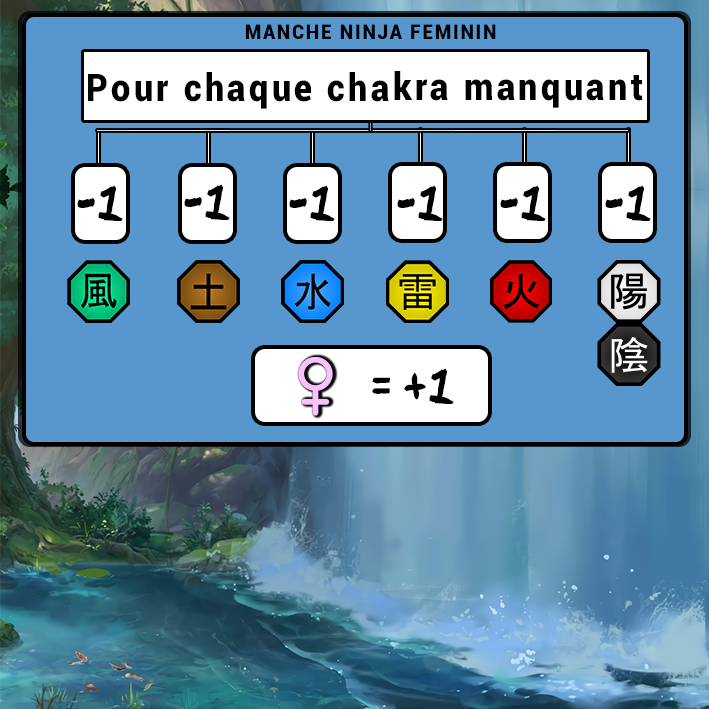
<style>
.page{position:relative;width:709px;height:709px;background:#5897cd}
.page>*{position:absolute;margin:0}
.t1{font:20.8px "Roboto-Black";letter-spacing:0.1em;color:#000000;scale:0.9 1}
.t2{font:38px "Roboto-Black";letter-spacing:0.1em;color:#000000;scale:0.9 1}
.t3{font:39.3px "Ninja-Naruto";letter-spacing:0.1em;color:#000000;scale:0.9 1}
</style>
<div class="page">
<p class="t1" style="left:245px;top:24px;width:251px;height:15px">MANCHE NINJA FEMININ</p>
<p class="t2" style="left:88px;top:71px;width:555px;height:38px">Pour chaque chakra manquant</p>
<p class="t3" style="left:77px;top:185px;width:46px;height:36px">-1</p>
<p class="t3" style="left:184px;top:184px;width:46px;height:36px">-1</p>
<p class="t3" style="left:289px;top:185px;width:46px;height:36px">-1</p>
<p class="t3" style="left:397px;top:185px;width:46px;height:36px">-1</p>
<p class="t3" style="left:500px;top:185px;width:46px;height:36px">-1</p>
<p class="t3" style="left:605px;top:185px;width:46px;height:36px">-1</p>
<p class="t3" style="left:372px;top:368px;width:82px;height:36px">= +1</p>
</div>
